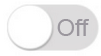
<style>
.page{position:relative;width:101px;height:56px;background:#ffffff}
.page>*{position:absolute;margin:0}
.t1{font:24px "ArialMT";color:#9a969d}
</style>
<div class="page">
<p class="t1" style="left:57px;top:19px;width:32px;height:17px">Off</p>
</div>
